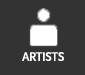
<style>
.page{position:relative;width:85px;height:75px;background:#333333}
.page>*{position:absolute;margin:0}
.t1{font:11px "NanumBarunGothicBold";color:#ffffff}
</style>
<div class="page">
<p class="t1" style="left:22px;top:52px;width:42px;height:9px">ARTISTS</p>
</div>
